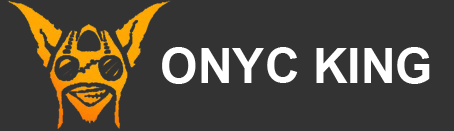
<style>
.page{position:relative;width:454px;height:131px;background:#333333}
.page>*{position:absolute;margin:0}
.t1{font:48px "Arial-BoldMT";color:#ffffff}
</style>
<div class="page">
<p class="t1" style="left:162px;top:47px;width:268px;height:37px">ONYC KING</p>
</div>
